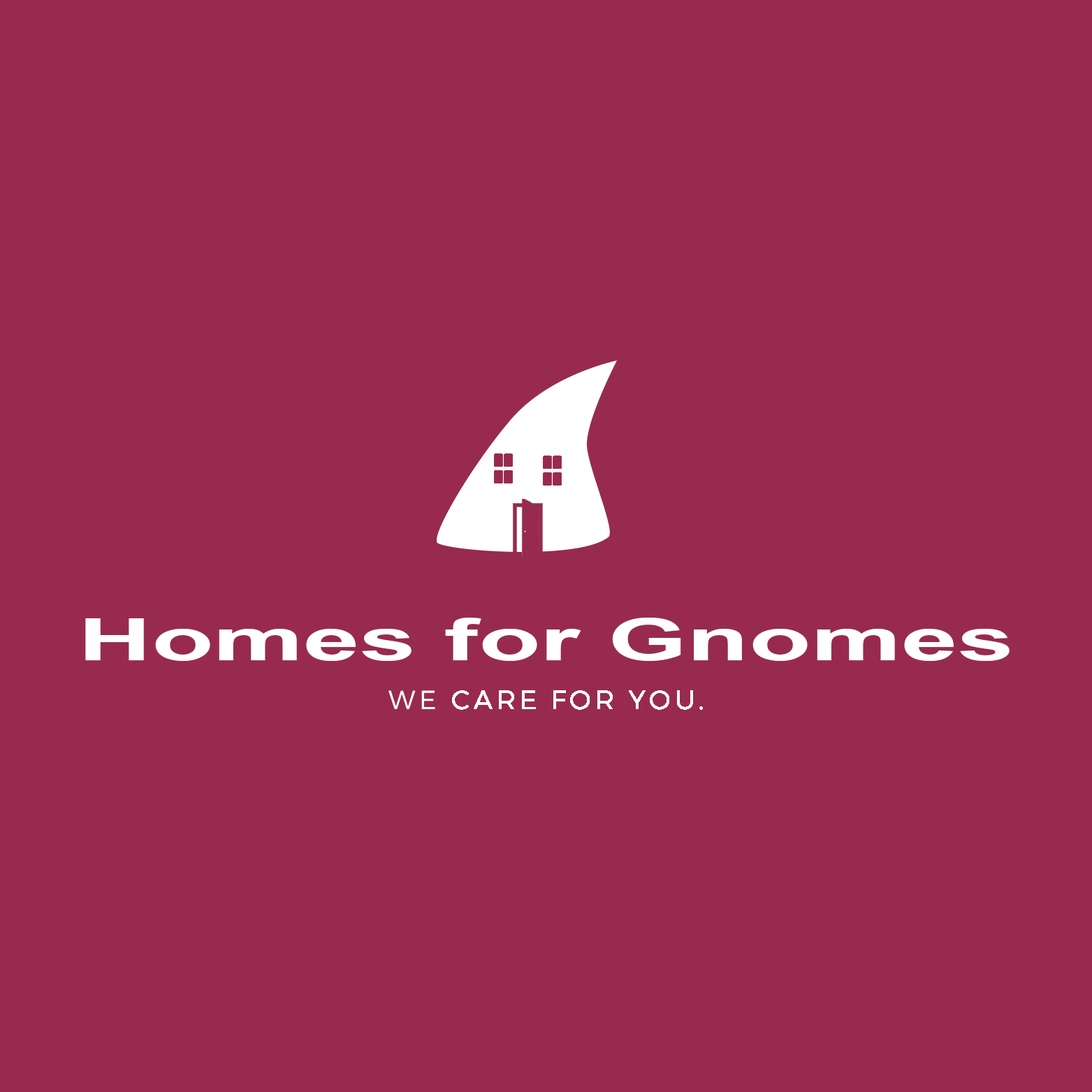
<style>
.page{position:relative;width:1092px;height:1092px;background:#982a50}
.page>*{position:absolute;margin:0}
.t1{font:58.7px "Arial-BoldMT";color:#ffffff;scale:1.73 1}
</style>
<div class="page">
<p class="t1" style="left:85px;top:618px;width:925px;height:43px">Homes for Gnomes</p>
</div>
